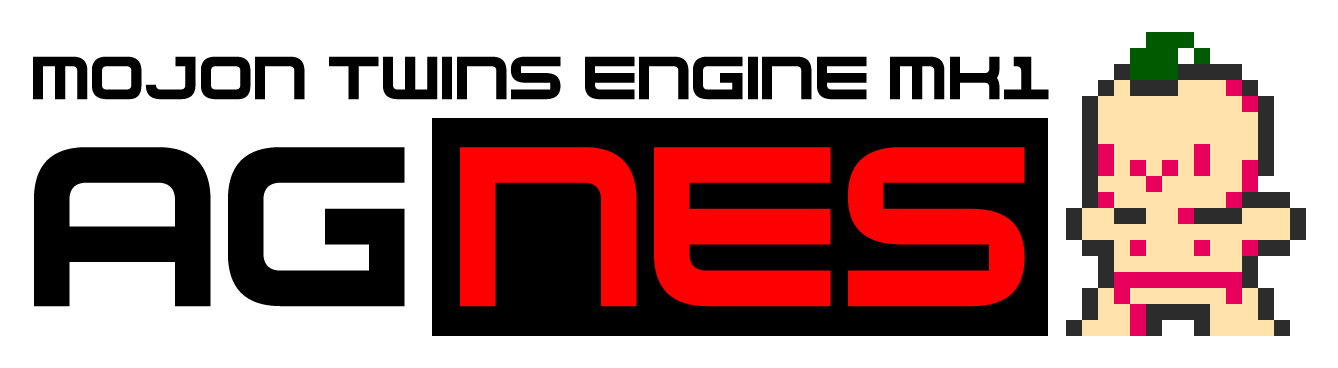
<style>
.page{position:relative;width:1338px;height:368px;background:#ffffff}
.page>*{position:absolute;margin:0}
.t1{font:96.3px "NesController";color:#000000;scale:1.05 1}
.t2{font:361.3px "NesController";color:#000000}
.t3{font:361.3px "NesController";color:#ff0000}
</style>
<div class="page">
<p class="t1" style="left:33px;top:56px;width:1016px;height:44px">Mojon twins engine mk1</p>
<p class="t2" style="left:34px;top:147px;width:371px;height:160px">AG</p>
<p class="t3" style="left:460px;top:147px;width:565px;height:160px">NES</p>
</div>
